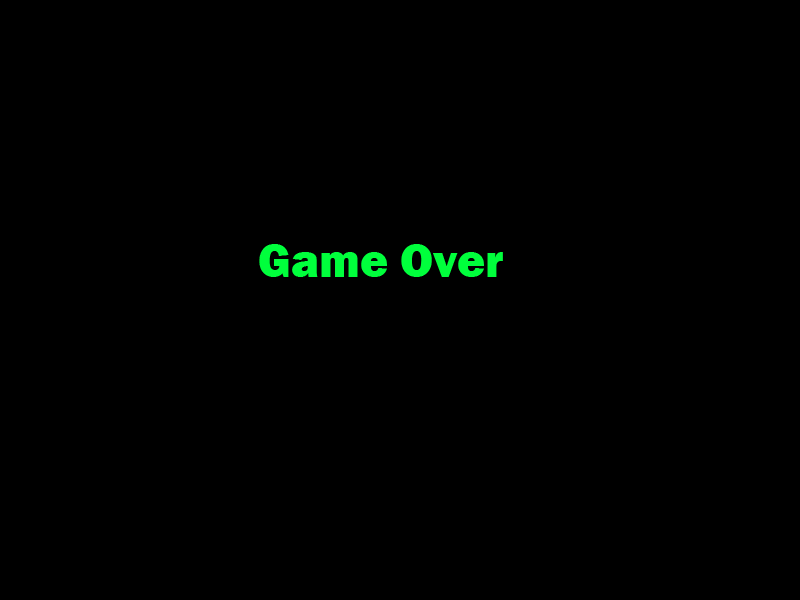
<style>
.page{position:relative;width:800px;height:600px;background:#000000}
.page>*{position:absolute;margin:0}
.t1{font:48px "FranklinGothic-Heavy";color:#00ff3c}
</style>
<div class="page">
<p class="t1" style="left:259px;top:244px;width:244px;height:33px">Game Over</p>
</div>
